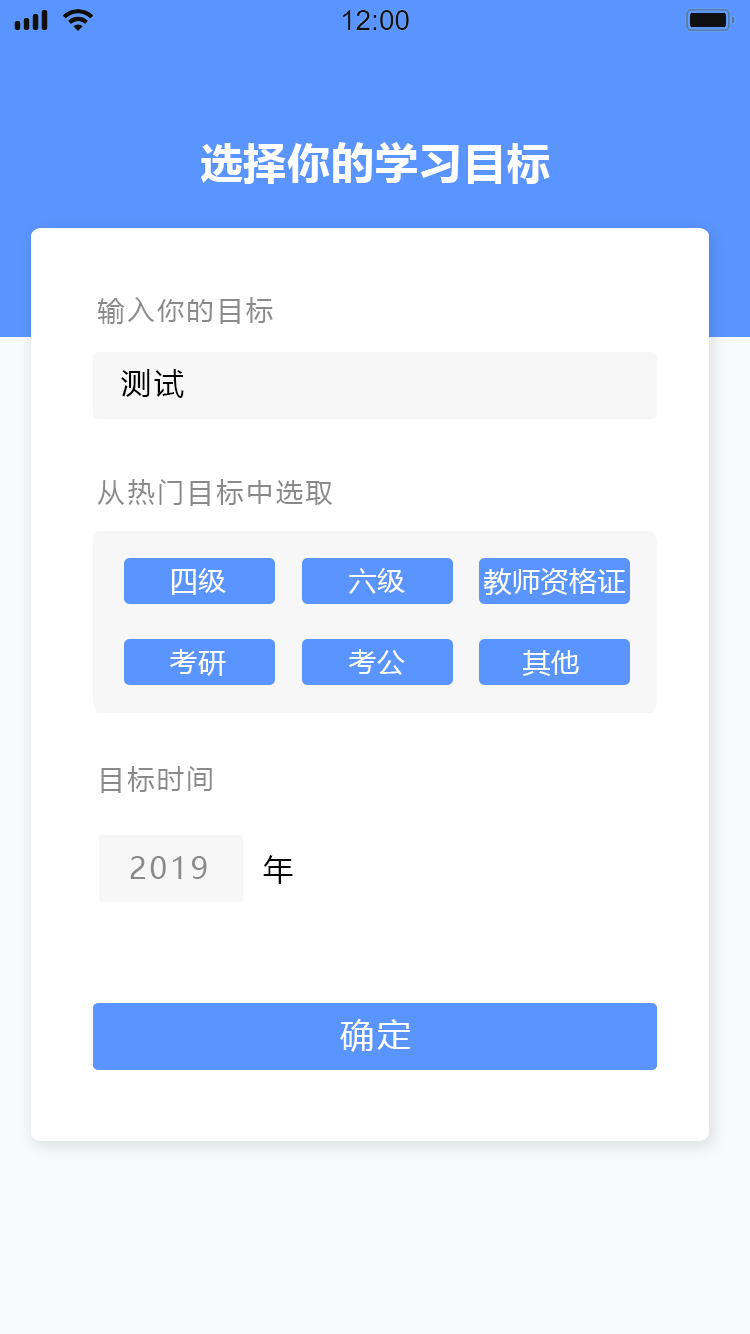
<style>
.page{position:relative;width:750px;height:1334px;background:#ffffff}
.page>*{position:absolute;margin:0}
.t1{font:43px "MicrosoftYaHei-Bold";letter-spacing:0.02em;color:#ffffff}
.t2{font:27px "MicrosoftYaHei";letter-spacing:0.1em;color:#8a8a8a}
.t3{font:30px "MicrosoftYaHei";letter-spacing:0.1em;color:#000000}
.t4{font:28px "MicrosoftYaHei";letter-spacing:0.02em;color:#ffffff}
.t5{font:30px "MicrosoftYaHei";letter-spacing:0.1em;color:#8a8a8a}
.t6{font:34px "MicrosoftYaHei";letter-spacing:0.1em;color:#ffffff}
</style>
<div class="page">
<p class="t1" style="left:201px;top:142px;width:349px;height:42px">选择你的学习目标</p>
<p class="t2" style="left:97px;top:297px;width:176px;height:27px">输入你的目标</p>
<p class="t3" style="left:121px;top:369px;width:63px;height:29px">测试</p>
<p class="t2" style="left:97px;top:479px;width:236px;height:27px">从热门目标中选取</p>
<p class="t4" style="left:172px;top:568px;width:54px;height:27px">四级</p>
<p class="t4" style="left:349px;top:568px;width:56px;height:26px">六级</p>
<p class="t4" style="left:483px;top:568px;width:143px;height:27px">教师资格证</p>
<p class="t4" style="left:169px;top:649px;width:57px;height:27px">考研</p>
<p class="t4" style="left:348px;top:649px;width:57px;height:26px">考公</p>
<p class="t4" style="left:522px;top:650px;width:57px;height:26px">其他</p>
<p class="t2" style="left:101px;top:766px;width:111px;height:27px">目标时间</p>
<p class="t5" style="left:130px;top:856px;width:77px;height:23px">2019</p>
<p class="t3" style="left:263px;top:855px;width:30px;height:29px">年</p>
<p class="t6" style="left:340px;top:1019px;width:71px;height:33px">确定</p>
</div>
